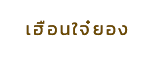
<style>
.page{position:relative;width:154px;height:64px;background:#ffffff}
.page>*{position:absolute;margin:0}
.t1{font:18px "Kanit-Regular";letter-spacing:0.1em;color:#6c4a00}
</style>
<div class="page">
<p class="t1" style="left:26px;top:20px;width:102px;height:16px">เฮือนใจ๋ยอง</p>
<p class="t1" style="left:26px;top:20px;width:102px;height:16px">เฮือนใจ๋ยอง</p>
</div>
